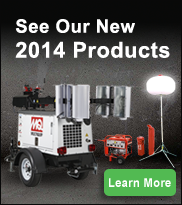
<style>
.page{position:relative;width:182px;height:205px}
.page>*{position:absolute;margin:0}
.t1{font:21.7px/24.9px "Arial-BoldMT";letter-spacing:0.025em;color:#ffffff}
.t2{font:18.6px/24.9px "Arial-BoldMT";letter-spacing:0.025em;color:#ffffff}
.t3{font:12px "Arial-BoldMT";letter-spacing:0.025em;color:#ffffff;scale:0.94 1}
</style>
<div class="page">
<p class="t1" style="left:15px;top:19px;width:155px;height:39px"><span class="t2">See Our New<br></span>2014 Products</p>
<p class="t3" style="left:109px;top:178px;width:62px;height:9px">Learn More</p>
</div>
